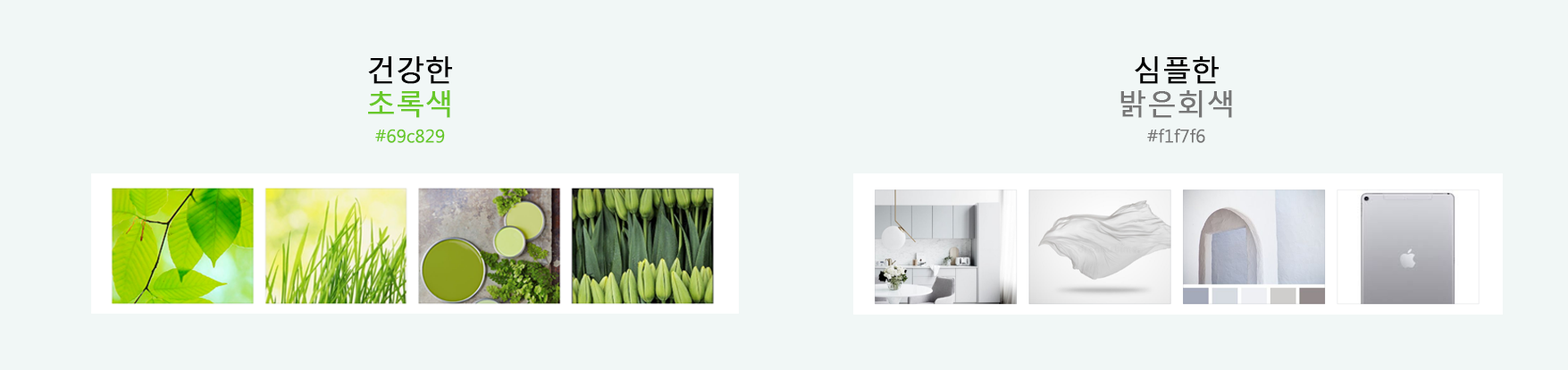
<style>
.page{position:relative;width:1568px;height:370px;background:#f1f7f6}
.page>*{position:absolute;margin:0}
.t1{font:28.6px "MalgunGothicRegular";color:#000000;text-transform:uppercase;font-weight:bold}
.t2{font:28.6px "MalgunGothicRegular";color:#68c829;text-transform:uppercase;font-weight:bold}
.t3{font:28.6px "MalgunGothicRegular";color:#767676;text-transform:uppercase;font-weight:bold}
.t4{font:17.9px "MalgunGothicRegular";color:#68c829}
.t5{font:17.9px "MalgunGothicRegular";color:#767676}
</style>
<div class="page">
<p class="t1" style="left:368px;top:56px;width:84px;height:62px;text-align:center">건강한<br><span class="t2">초록색</span></p>
<p class="t3" style="left:1120px;top:56px;width:112px;height:62px;text-align:center"><span class="t1">심플한<br></span>밝은회색</p>
<p class="t4" style="left:375px;top:129px;width:70px;height:14px">#69c829</p>
<p class="t5" style="left:1147px;top:128px;width:58px;height:15px">#f1f7f6</p>
</div>
